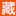
<style>
.page{position:relative;width:16px;height:16px;background:#f05307}
.page>*{position:absolute;margin:0}
.t1{font:14.4px "STYuanti-SC-Regular";color:#faf0f0}
</style>
<div class="page">
<p class="t1" style="left:1px;top:1px;width:15px;height:14px">藏</p>
</div>
